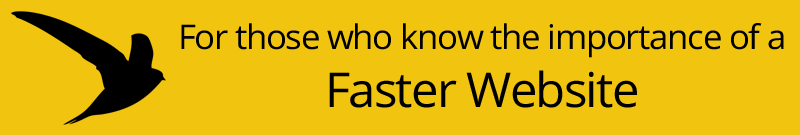
<style>
.page{position:relative;width:800px;height:135px;background:#f1c40f}
.page>*{position:absolute;margin:0}
.t1{font:34px "OpenSans";letter-spacing:-0.035em;color:#000000}
.t2{font:48.1px "OpenSans";letter-spacing:-0.035em;color:#000000}
</style>
<div class="page">
<p class="t1" style="left:181px;top:23px;width:603px;height:85px;text-align:center">For those who know the importance of a <br><span class="t2">Faster Website</span></p>
</div>
